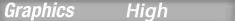
<style>
.page{position:relative;width:235px;height:21px;background:#b2b2b2}
.page>*{position:absolute;margin:0}
.t1{font:20px "HelveticaNeueLTPro-BdCnO";color:#ffffff}
.t2{font:20px "MyriadPro-Regular";color:#ffffff;font-weight:bold;font-style:italic}
</style>
<div class="page">
<p class="t1" style="left:4px;top:2px;width:71px;height:19px">Graphics</p>
<p class="t2" style="left:126px;top:2px;width:42px;height:20px">High</p>
</div>
